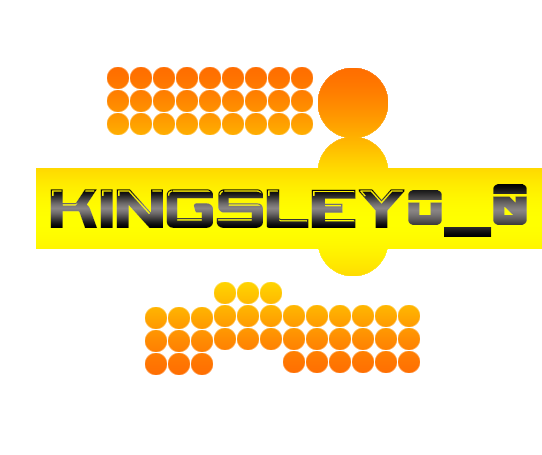
<style>
.page{position:relative;width:542px;height:455px;background:#ffffff}
.page>*{position:absolute;margin:0}
.t1{font:65px "ARDESTINE";scale:1.1 1}
.t2{font:65px "CRYSTALCORE";scale:1.1 1}
</style>
<div class="page">
<p class="t1" style="left:408px;top:184px;width:119px;height:53px">o_0</p>
<p class="t2" style="left:50px;top:189px;width:355px;height:39px">KINGSLEY</p>
</div>
